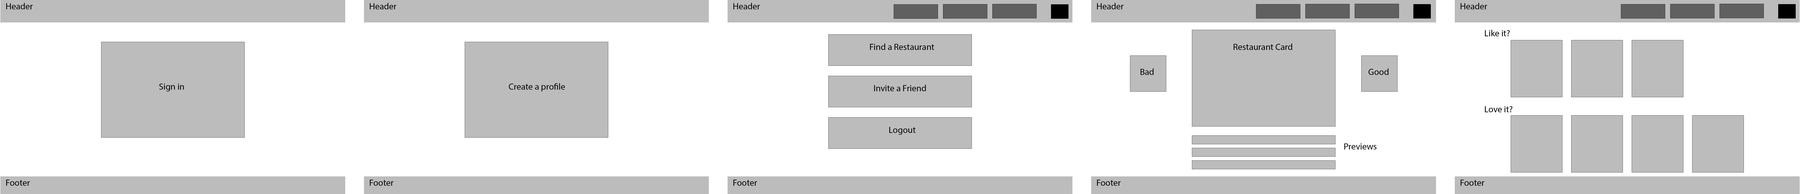
<style>
.page{position:relative;width:1800px;height:194px;background:#ffffff}
.page>*{position:absolute;margin:0}
.t1{font:9px "MyriadPro-Regular";color:#000000}
</style>
<div class="page">
<p class="t1" style="left:6px;top:3px;width:27px;height:6px">Header</p>
<p class="t1" style="left:370px;top:3px;width:26px;height:6px">Header</p>
<p class="t1" style="left:733px;top:3px;width:27px;height:6px">Header</p>
<p class="t1" style="left:1097px;top:3px;width:27px;height:6px">Header</p>
<p class="t1" style="left:1461px;top:3px;width:26px;height:6px">Header</p>
<p class="t1" style="left:1485px;top:30px;width:25px;height:6px">Like it?</p>
<p class="t1" style="left:870px;top:44px;width:64px;height:6px">Find a Restaurant</p>
<p class="t1" style="left:1234px;top:44px;width:58px;height:6px">Restaurant Card</p>
<p class="t1" style="left:1140px;top:69px;width:14px;height:6px">Bad</p>
<p class="t1" style="left:1369px;top:69px;width:20px;height:6px">Good</p>
<p class="t1" style="left:159px;top:84px;width:25px;height:8px">Sign in</p>
<p class="t1" style="left:509px;top:83px;width:56px;height:9px">Create a profile</p>
<p class="t1" style="left:874px;top:85px;width:52px;height:6px">Invite a Friend</p>
<p class="t1" style="left:1485px;top:106px;width:27px;height:6px">Love it?</p>
<p class="t1" style="left:889px;top:127px;width:27px;height:8px">Logout</p>
<p class="t1" style="left:1344px;top:144px;width:32px;height:6px">Previews</p>
<p class="t1" style="left:6px;top:180px;width:24px;height:6px">Footer</p>
<p class="t1" style="left:370px;top:180px;width:23px;height:6px">Footer</p>
<p class="t1" style="left:733px;top:180px;width:24px;height:6px">Footer</p>
<p class="t1" style="left:1097px;top:180px;width:24px;height:6px">Footer</p>
<p class="t1" style="left:1461px;top:180px;width:23px;height:6px">Footer</p>
</div>
